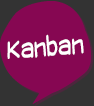
<style>
.page{position:relative;width:94px;height:106px;background:#860752}
.page>*{position:absolute;margin:0}
.t1{font:28px "SuplexmentaryComicNC";color:#ffffff;scale:0.8 1}
</style>
<div class="page">
<p class="t1" style="left:7px;top:34px;width:77px;height:25px;rotate:-5deg">Kanban</p>
</div>
